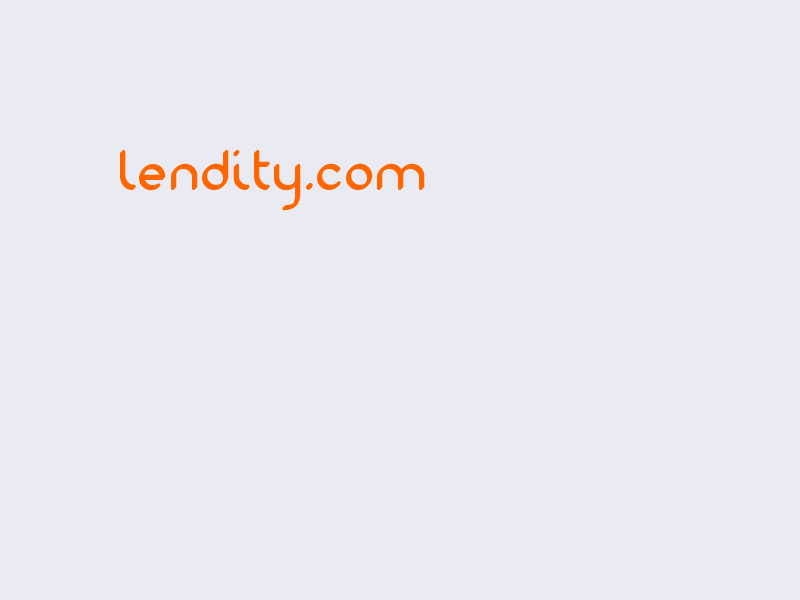
<style>
.page{position:relative;width:800px;height:600px;background:#eaeaf2}
.page>*{position:absolute;margin:0}
.t1{font:60px "Giro-Light";color:#ff6600}
</style>
<div class="page">
<p class="t1" style="left:120px;top:152px;width:303px;height:59px">lendity.com</p>
</div>
